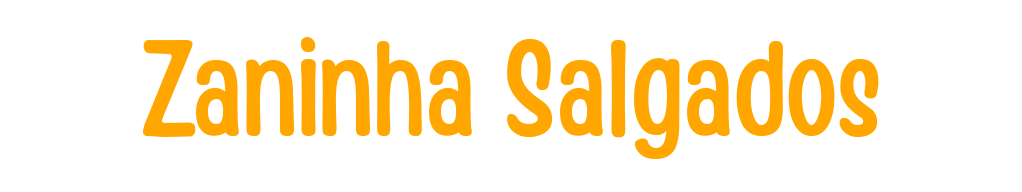
<style>
.page{position:relative;width:1022px;height:192px;background:#ffffff}
.page>*{position:absolute;margin:0}
.t1{font:135.6px "HandyCasualCondensed-Regular";color:#ffa700}
</style>
<div class="page">
<p class="t1" style="left:143px;top:37px;width:736px;height:122px">Zaninha Salgados</p>
</div>
